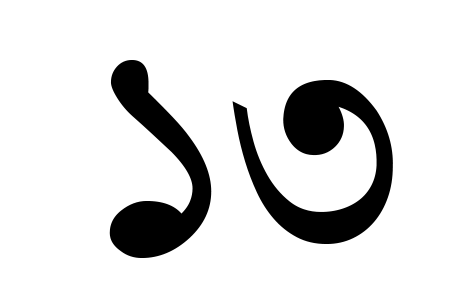
<style>
.page{position:relative;width:472px;height:306px;background:#ffffff}
.page>*{position:absolute;margin:0}
.t1{font:300px "KalpurushANSI";color:#000000}
</style>
<div class="page">
<p class="t1" style="left:109px;top:60px;width:284px;height:198px">13</p>
</div>
